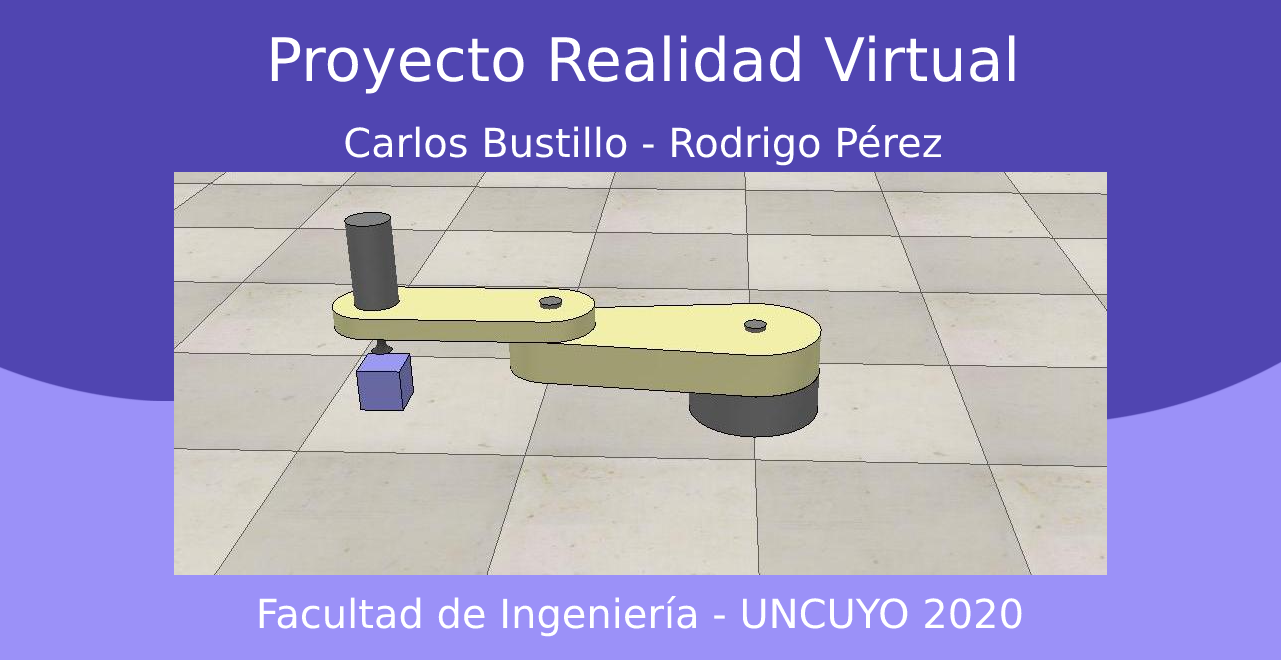
<style>
.page{position:relative;width:1281px;height:660px;background:#5045b1}
.page>*{position:absolute;margin:0}
.t1{font:40px "DejaVuSans";color:#ffffff}
.t2{font:60px "DejaVuSans";color:#ffffff}
</style>
<div class="page">
<p class="t1" style="left:271px;top:35px;width:744px;height:131px;text-align:center"><span class="t2">Proyecto Realidad Virtual<br><br></span>Carlos Bustillo - Rodrigo Pérez</p>
<p class="t1" style="left:259px;top:596px;width:763px;height:41px">Facultad de Ingeniería - UNCUYO 2020</p>
</div>
